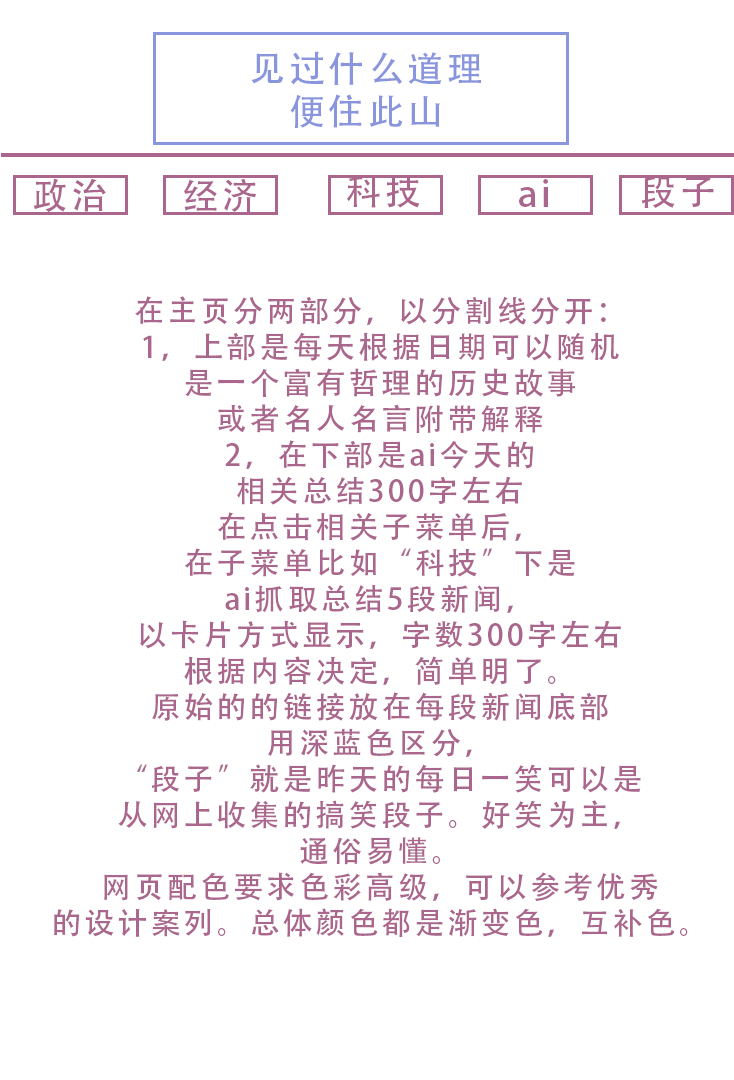
<style>
.page{position:relative;width:734px;height:1080px;background:#ffffff}
.page>*{position:absolute;margin:0}
.t1{font:36px "AdobeHeitiStd-Regular";letter-spacing:0.1em;color:#8995dd}
.t2{font:36px "AdobeHeitiStd-Regular";letter-spacing:0.1em;color:#aa668c}
.t3{font:30px "AdobeHeitiStd-Regular";letter-spacing:0.1em;color:#aa668c}
</style>
<div class="page">
<p class="t1" style="left:251px;top:51px;width:230px;height:77px;text-align:center">见过什么道理<br>便住此山</p>
<p class="t2" style="left:33px;top:178px;width:73px;height:34px">政治</p>
<p class="t2" style="left:184px;top:178px;width:73px;height:34px">经济</p>
<p class="t2" style="left:346px;top:175px;width:74px;height:33px">科技</p>
<p class="t2" style="left:519px;top:179px;width:29px;height:28px">ai</p>
<p class="t2" style="left:641px;top:176px;width:73px;height:32px">段子</p>
<p class="t3" style="left:54px;top:296px;width:634px;height:641px;text-align:center">在主页分两部分，以分割线分开：<br>1，上部是每天根据日期可以随机<br>是一个富有哲理的历史故事<br>或者名人名言附带解释<br>2，在下部是ai今天的<br>相关总结300字左右<br>在点击相关子菜单后，<br>在子菜单比如“科技”下是<br>ai抓取总结5段新闻，<br>以卡片方式显示，字数300字左右<br>根据内容决定，简单明了。<br>原始的的链接放在每段新闻底部<br>用深蓝色区分，<br>“段子”就是昨天的每日一笑可以是<br>从网上收集的搞笑段子。好笑为主，<br>通俗易懂。<br>网页配色要求色彩高级，可以参考优秀<br>的设计案列。总体颜色都是渐变色，互补色。</p>
</div>
